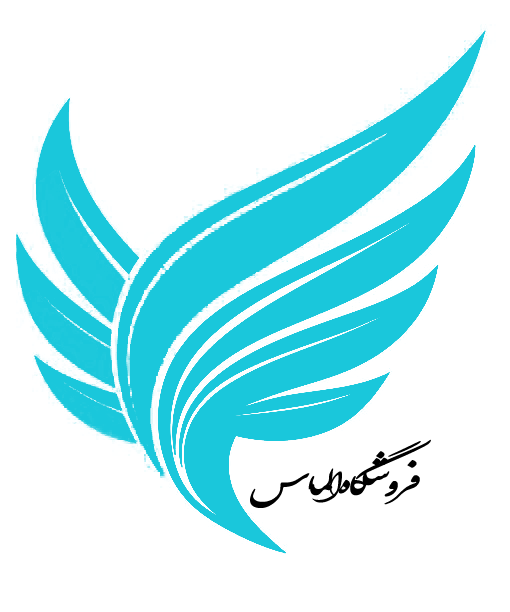
<style>
.page{position:relative;width:510px;height:612px;background:#ffffff}
.page>*{position:absolute;margin:0}
.t1{font:37.8px/24.3px "Shekasteh_Beta";letter-spacing:-0.06em;color:#000000;font-weight:bold;scale:1.4 1}
</style>
<div class="page">
<p class="t1" style="left:250px;top:439px;width:181px;height:69px;text-align:center">فروشگاه الماس</p>
</div>
